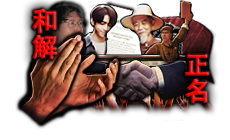
<style>
.page{position:relative;width:230px;height:140px;background:#ffffff}
.page>*{position:absolute;margin:0}
.t1{font:25.9px "AdobeHeitiStd-Regular";font-weight:bold}
</style>
<div class="page">
<p class="t1" style="left:32px;top:8px;width:25px;height:52px">和解</p>
<p class="t1" style="left:185px;top:54px;width:24px;height:50px">正名</p>
</div>
